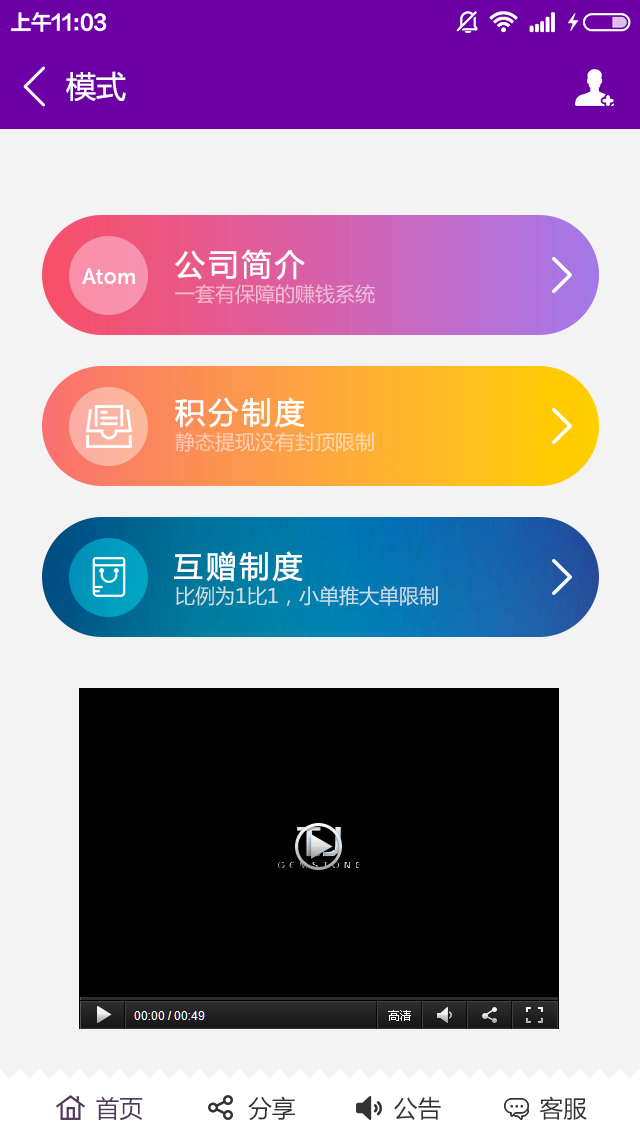
<style>
.page{position:relative;width:640px;height:1136px;background:#f3f3f3}
.page>*{position:absolute;margin:0}
.t1{font:30px "MicrosoftYaHei";color:#ffffff}
.t2{font:30px "MicrosoftYaHei";letter-spacing:0.075em;color:#ffffff;font-weight:bold}
.t3{font:20px "MicrosoftYaHei";color:#efbad2}
.t4{font:20px "MicrosoftYaHei";color:#fed3b2}
.t5{font:20px "MicrosoftYaHei";color:#cbdde8}
.t6{font:24px "MicrosoftYaHei";color:#333333}
.t7{font:24px "MicrosoftYaHei";color:#50385b}
</style>
<div class="page">
<p class="t1" style="left:66px;top:71px;width:60px;height:30px">模式</p>
<p class="t2" style="left:175px;top:249px;width:130px;height:31px">公司简介</p>
<p class="t3" style="left:175px;top:284px;width:200px;height:20px">一套有保障的赚钱系统</p>
<p class="t2" style="left:175px;top:397px;width:130px;height:31px">积分制度</p>
<p class="t4" style="left:175px;top:432px;width:199px;height:20px">静态提现没有封顶限制</p>
<p class="t2" style="left:174px;top:551px;width:129px;height:31px">互赠制度</p>
<p class="t5" style="left:176px;top:586px;width:262px;height:20px">比例为1比1，小单推大单限制</p>
<p class="t6" style="left:96px;top:1096px;width:491px;height:25px"><span class="t7">首页</span>               分享              公告              客服</p>
</div>
